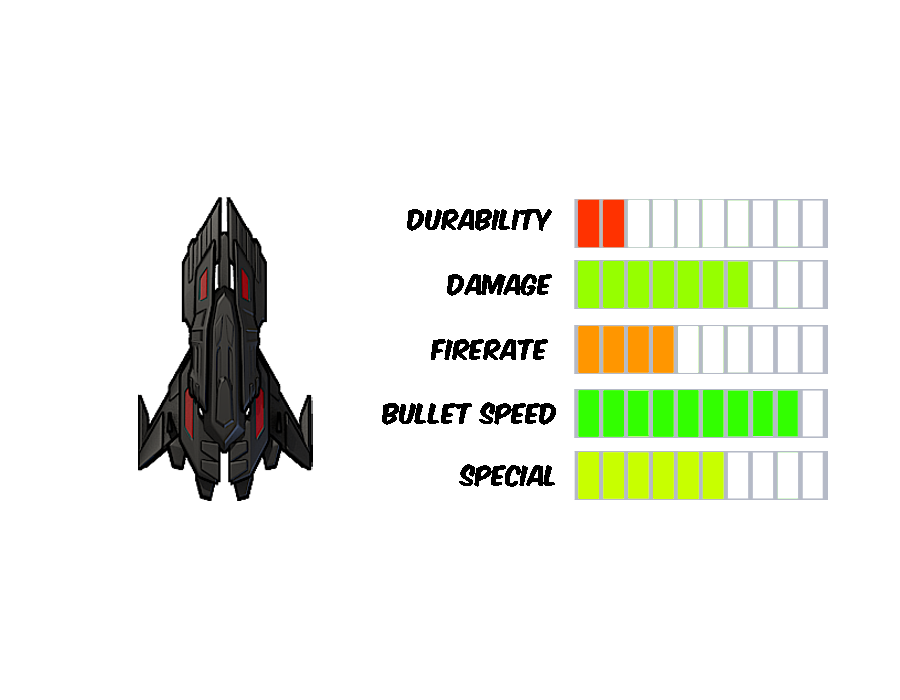
<style>
.page{position:relative;width:900px;height:700px;background:#ffffff}
.page>*{position:absolute;margin:0}
.t1{font:24px "KomikaAxis";color:#000000}
</style>
<div class="page">
<p class="t1" style="left:407px;top:209px;width:145px;height:22px">durability</p>
<p class="t1" style="left:447px;top:274px;width:105px;height:22px">damage</p>
<p class="t1" style="left:431px;top:339px;width:117px;height:21px">firerate</p>
<p class="t1" style="left:382px;top:402px;width:174px;height:23px">bullet speed</p>
<p class="t1" style="left:459px;top:464px;width:96px;height:23px">special</p>
</div>
